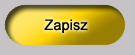
<style>
.page{position:relative;width:135px;height:55px;background:#c6c3c6}
.page>*{position:absolute;margin:0}
.t1{font:14.7px "ArialMT";color:#000000}
</style>
<div class="page">
<p class="t1" style="left:44px;top:19px;width:44px;height:14px">Zapisz</p>
</div>
